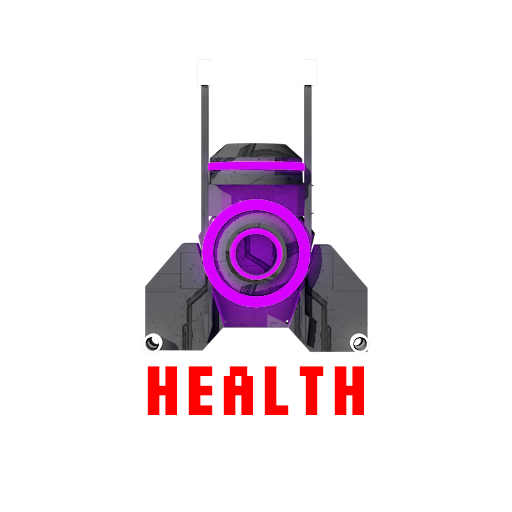
<style>
.page{position:relative;width:512px;height:512px;background:#ffffff}
.page>*{position:absolute;margin:0}
.t1{font:81.7px "Silkscreen-Bold";color:#ff0000;scale:0.6 1}
</style>
<div class="page">
<p class="t1" style="left:147px;top:366px;width:217px;height:49px">HEALTH</p>
</div>
